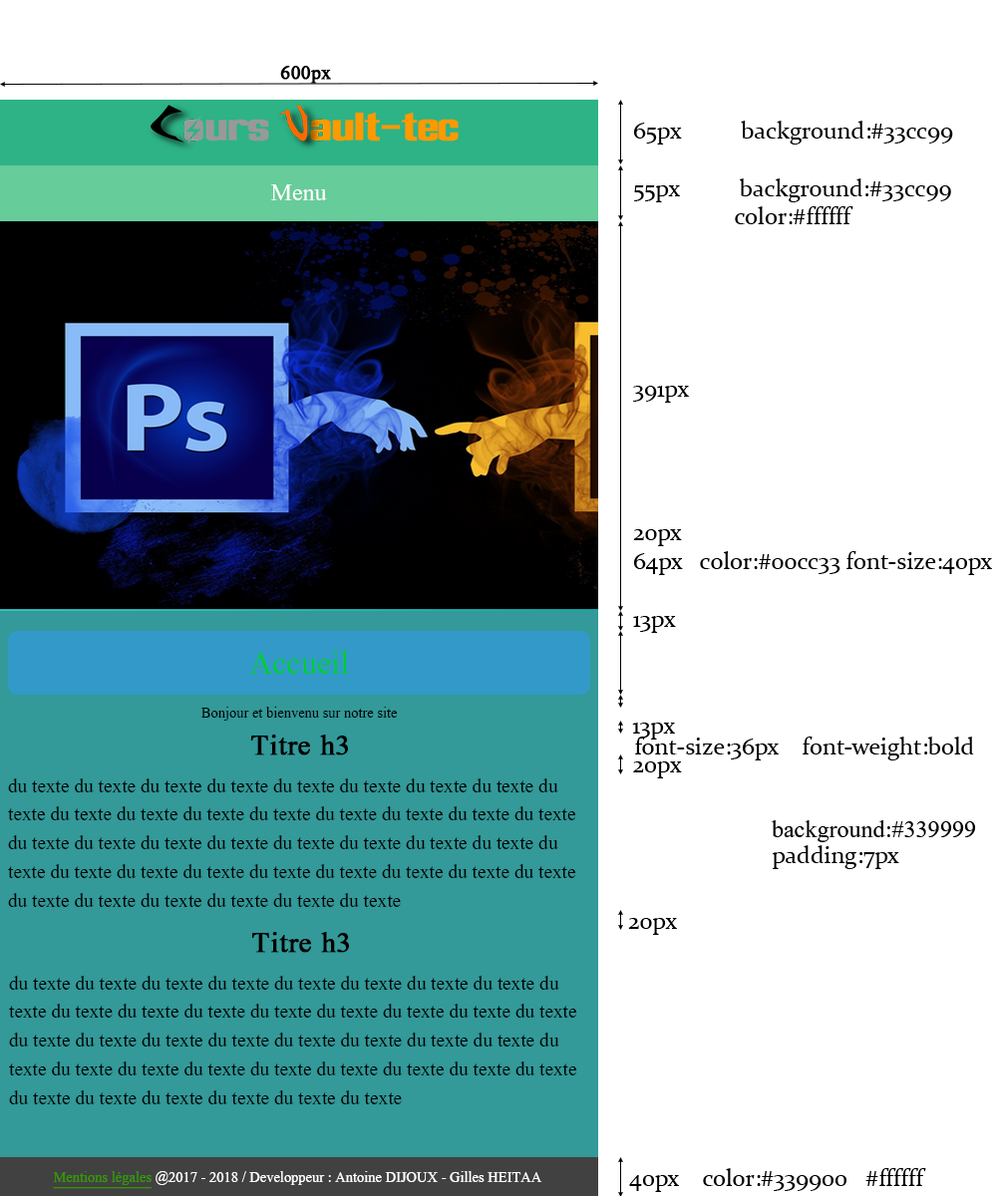
<style>
.page{position:relative;width:997px;height:1196px;background:#ffffff}
.page>*{position:absolute;margin:0}
.t1{font:23.9px "Aparajita";color:#000000;font-weight:bold}
.t2{font:23.9px "Constantia";color:#000000}
.t3{font:29.9px "Aparajita";color:#ffffff}
.t4{font:39.9px "Aparajita";color:#00cc33}
.t5{font:17.9px "Aparajita";color:#000000}
.t6{font:35.9px "Aparajita";color:#000000;font-weight:bold}
.t7{font:23.9px "Aparajita";color:#000000}
.t8{font:29.9px "Aparajita";color:#000000}
.t9{font:17.9px "Aparajita";color:#ffffff}
.t10{font:17.9px "Aparajita";color:#339900;text-decoration:underline}
</style>
<div class="page">
<p class="t1" style="left:280px;top:66px;width:51px;height:18px">600px</p>
<p class="t2" style="left:633px;top:121px;width:359px;height:512px">65px          background:#33cc99<br><br>55px          background:#33cc99<br>                 color:#ffffff<br><br><br><br><br><br>391px<br><br><br><br><br>20px<br>64px   color:#00cc33 font-size:40px<br><br>13px</p>
<p class="t3" style="left:270px;top:184px;width:57px;height:16px">Menu</p>
<p class="t4" style="left:249px;top:651px;width:100px;height:23px">Accueil</p>
<p class="t5" style="left:200px;top:707px;width:198px;height:14px">Bonjour et bienvenu sur notre site</p>
<p class="t2" style="left:632px;top:723px;width:43px;height:17px">13px</p>
<p class="t6" style="left:250px;top:735px;width:98px;height:21px">Titre h3</p>
<p class="t2" style="left:635px;top:737px;width:339px;height:24px">font-size:36px    font-weight:bold</p>
<p class="t2" style="left:633px;top:762px;width:49px;height:17px">20px</p>
<p class="t7" style="left:8px;top:779px;width:568px;height:128px">du texte du texte du texte du texte du texte du texte du texte du texte du texte du texte du texte du texte du texte du texte du texte du texte du texte du texte du texte du texte du texte du texte du texte du texte du texte du texte du texte du texte du texte du texte du texte du texte du texte du texte du texte du texte du texte du texte du texte du texte</p>
<p class="t8" style="left:772px;top:820px;width:204px;height:22px">background:#339999</p>
<p class="t2" style="left:773px;top:845px;width:126px;height:24px">padding:7px</p>
<p class="t2" style="left:628px;top:918px;width:49px;height:17px">20px</p>
<p class="t6" style="left:251px;top:932px;width:98px;height:21px">Titre h3</p>
<p class="t7" style="left:9px;top:976px;width:568px;height:129px">du texte du texte du texte du texte du texte du texte du texte du texte du texte du texte du texte du texte du texte du texte du texte du texte du texte du texte du texte du texte du texte du texte du texte du texte du texte du texte du texte du texte du texte du texte du texte du texte du texte du texte du texte du texte du texte du texte du texte du texte</p>
<p class="t2" style="left:629px;top:1168px;width:297px;height:24px">40px    color:#339900   #ffffff</p>
<p class="t9" style="left:53px;top:1171px;width:489px;height:18px"><span class="t10">Mentions légales</span> @2017 - 2018 / Developpeur : Antoine DIJOUX - Gilles HEITAA</p>
</div>
